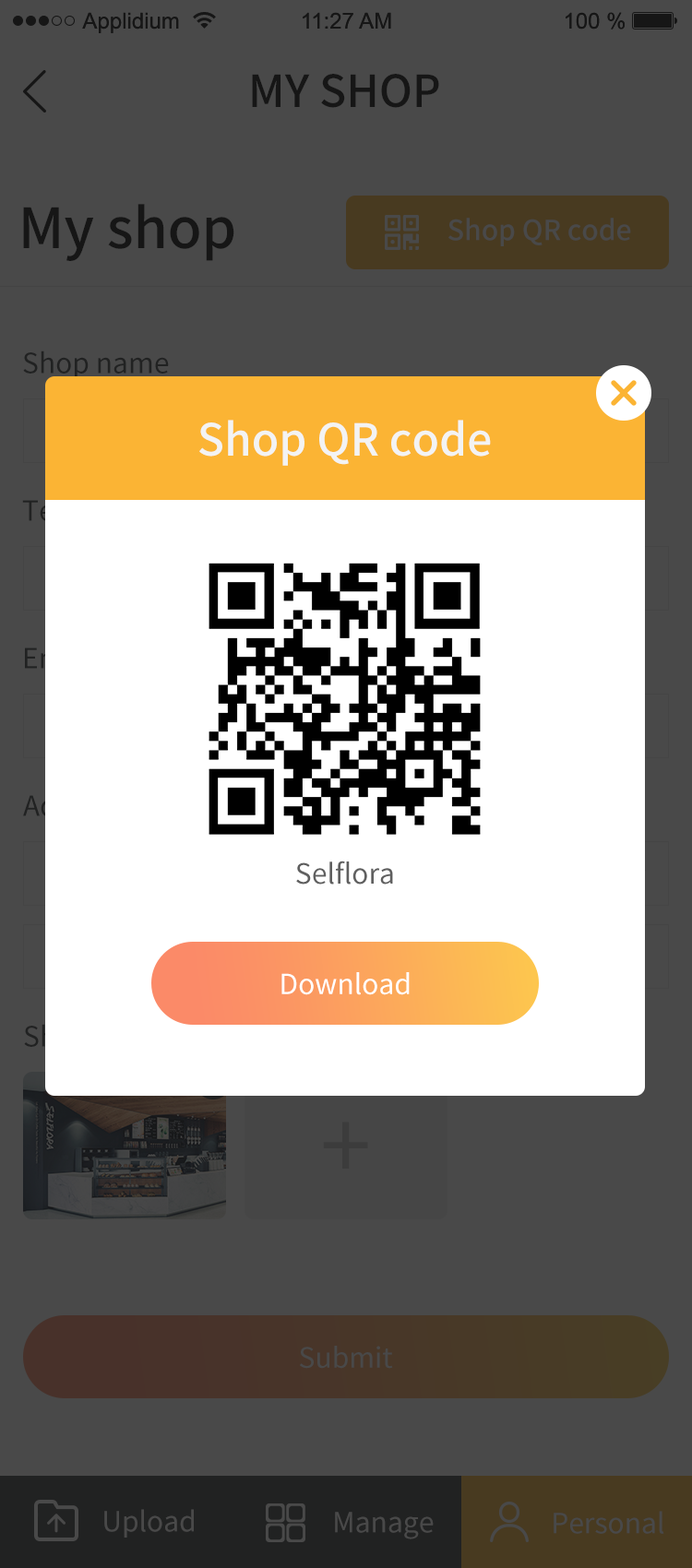
<style>
.page{position:relative;width:692px;height:1568px;background:#494949}
.page>*{position:absolute;margin:0}
.t1{font:44.3px "SourceHanSansCN-Medium";color:#010101;text-transform:uppercase}
.t2{font:55.3px "SourceHanSansCN-Medium";color:#010101}
.t3{font:27.7px "SourceHanSansCN-Medium";color:#494949}
.t4{font:27.7px "SourceHanSansCN-Regular";color:#212222}
.t5{font:44.3px "SourceHanSansCN-Medium";color:#f3f3f3}
.t6{font:27.7px "SourceHanSansCN-Regular";color:#5f5f5f}
.t7{font:27.7px "SourceHanSansCN-Regular";color:#ffffff}
.t8{font:92.2px "SourceHanSansCN-Regular";color:#3c3c3c}
.t9{font:27.7px "SourceHanSansCN-Regular";color:#494949}
</style>
<div class="page">
<p class="t1" style="left:252px;top:74px;width:187px;height:34px">My shop</p>
<p class="t2" style="left:23px;top:204px;width:211px;height:57px">My shop</p>
<p class="t3" style="left:448px;top:218px;width:183px;height:28px">Shop QR code</p>
<p class="t4" style="left:23px;top:350px;width:146px;height:30px">Shop name</p>
<p class="t5" style="left:199px;top:420px;width:292px;height:46px">Shop QR code</p>
<p class="t6" style="left:296px;top:861px;width:97px;height:24px">Selflora</p>
<p class="t7" style="left:281px;top:972px;width:129px;height:23px">Download</p>
<p class="t8" style="left:323px;top:1122px;width:45px;height:47px">+</p>
<p class="t9" style="left:300px;top:1346px;width:93px;height:23px">Submit</p>
<p class="t9" style="left:104px;top:1509px;width:90px;height:29px">Upload</p>
<p class="t9" style="left:335px;top:1512px;width:99px;height:27px">Manage</p>
<p class="t9" style="left:553px;top:1511px;width:111px;height:23px">Personal</p>
</div>
